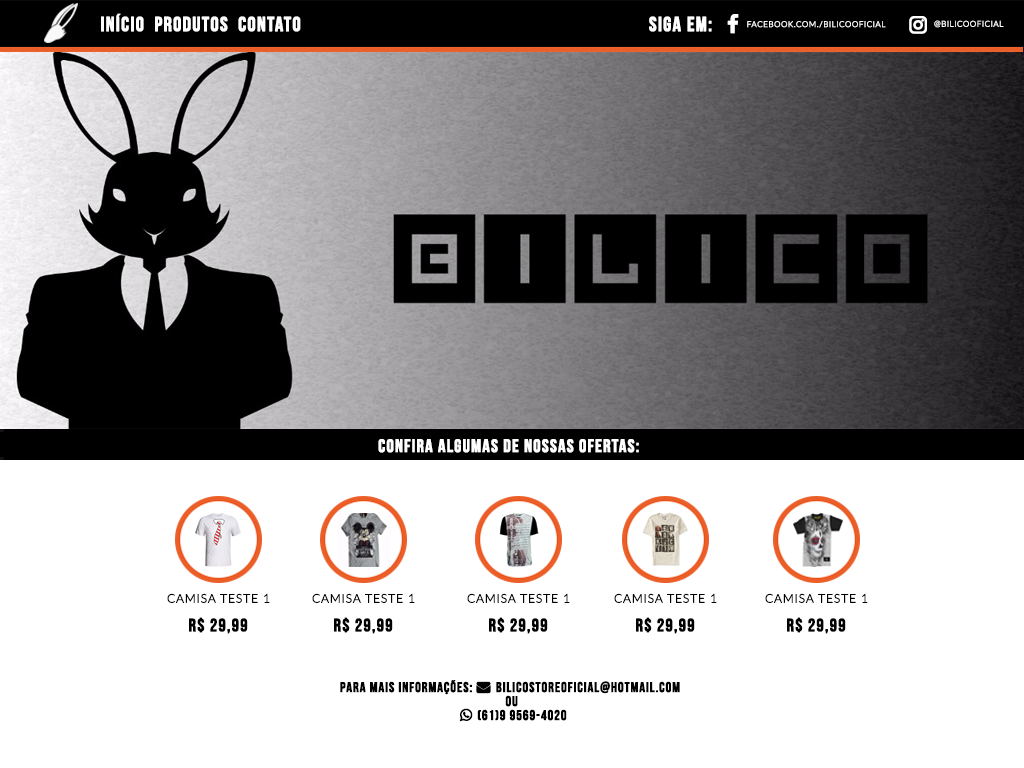
<style>
.page{position:relative;width:1024px;height:768px;background:#ffffff}
.page>*{position:absolute;margin:0}
.t1{font:20px "BebasNeue";letter-spacing:0.05em;color:#ffffff;text-transform:uppercase;font-weight:bold}
.t2{font:8px "Lato-Light";letter-spacing:0.05em;color:#ffffff;text-transform:uppercase;font-weight:bold}
.t3{font:18px "BebasNeue";letter-spacing:0.05em;color:#ffffff;text-transform:uppercase;font-weight:bold}
.t4{font:12px "Lato-Light";letter-spacing:0.05em;color:#000000;text-transform:uppercase;font-weight:bold}
.t5{font:18px "BebasNeue";letter-spacing:0.05em;color:#000000;text-transform:uppercase;font-weight:bold}
</style>
<div class="page">
<p class="t1" style="left:101px;top:13px;width:200px;height:19px">início  produtos  contato</p>
<p class="t1" style="left:649px;top:16px;width:63px;height:16px">siga em:</p>
<p class="t2" style="left:747px;top:21px;width:139px;height:7px">facebook.com./bilicooficial</p>
<p class="t2" style="left:934px;top:20px;width:70px;height:8px">@bilicooficial</p>
<p class="t3" style="left:378px;top:439px;width:261px;height:14px">confira algumas de nossas ofertas:</p>
<p class="t4" style="left:167px;top:593px;width:103px;height:10px">camisa teste 1</p>
<p class="t4" style="left:312px;top:593px;width:103px;height:10px">camisa teste 1</p>
<p class="t4" style="left:467px;top:593px;width:103px;height:10px">camisa teste 1</p>
<p class="t4" style="left:614px;top:593px;width:103px;height:10px">camisa teste 1</p>
<p class="t4" style="left:765px;top:593px;width:103px;height:10px">camisa teste 1</p>
<p class="t5" style="left:189px;top:617px;width:59px;height:17px">r$ 29,99</p>
<p class="t5" style="left:334px;top:617px;width:59px;height:17px">r$ 29,99</p>
<p class="t5" style="left:489px;top:617px;width:59px;height:17px">r$ 29,99</p>
<p class="t5" style="left:636px;top:617px;width:59px;height:17px">r$ 29,99</p>
<p class="t5" style="left:787px;top:617px;width:59px;height:17px">r$ 29,99</p>
</div>
